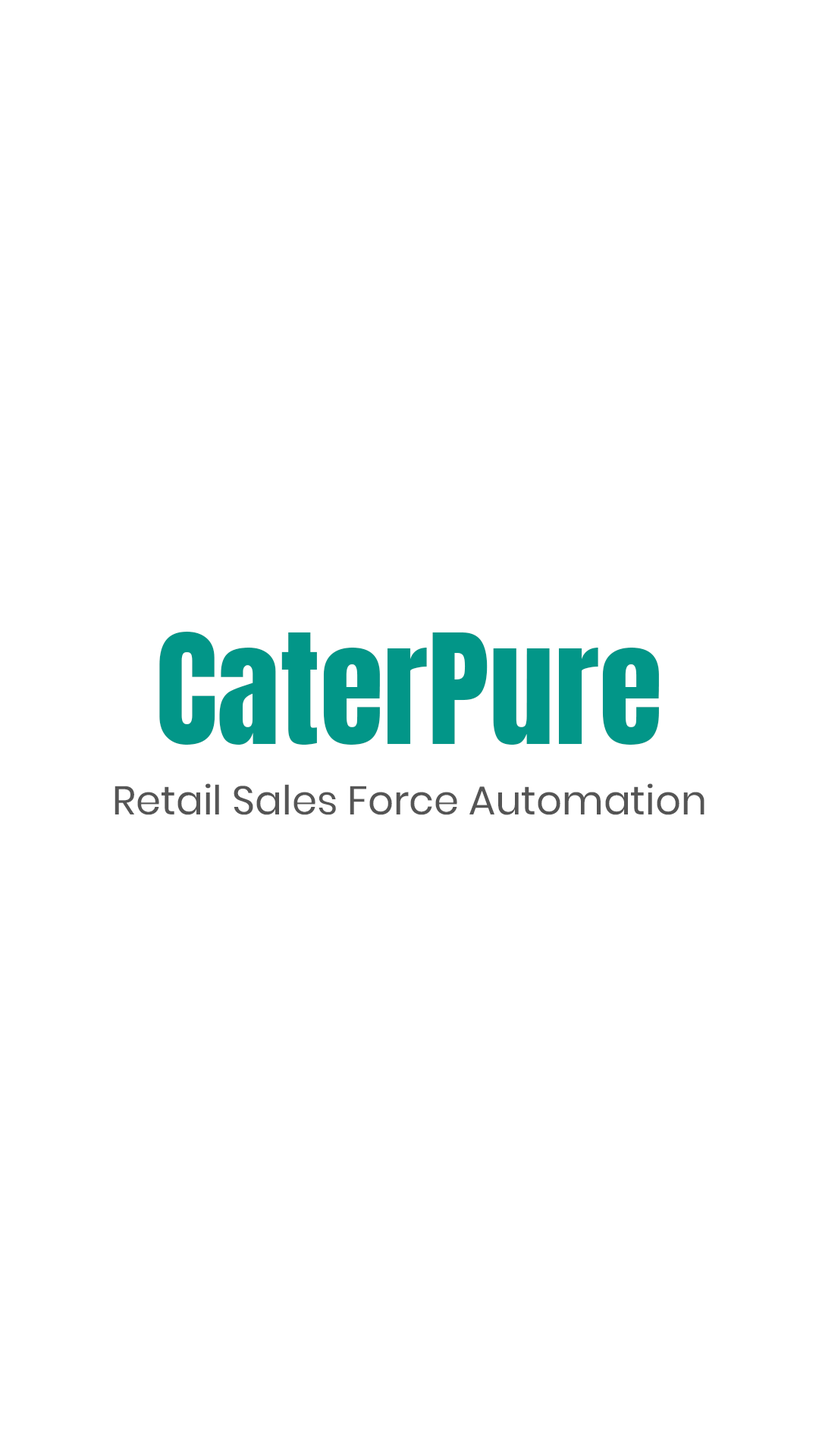
<style>
.page{position:relative;width:819px;height:1456px;background:#ffffff}
.page>*{position:absolute;margin:0}
.t1{font:130.1px "Anton-Regular";color:#029688}
.t2{font:40.2px "Poppins-Regular";color:#555555}
</style>
<div class="page">
<p class="t1" style="left:159px;top:632px;width:500px;height:113px">CaterPure</p>
<p class="t2" style="left:115px;top:783px;width:589px;height:32px">Retail Sales Force Automation</p>
</div>
